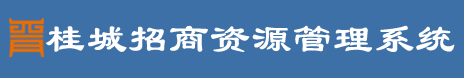
<style>
.page{position:relative;width:464px;height:78px;background:#3d70a7}
.page>*{position:absolute;margin:0}
.t1{font:40px "LiSu";color:#ffffff;font-weight:bold}
</style>
<div class="page">
<p class="t1" style="left:46px;top:25px;width:409px;height:27px">桂城招商资源管理系统</p>
</div>
